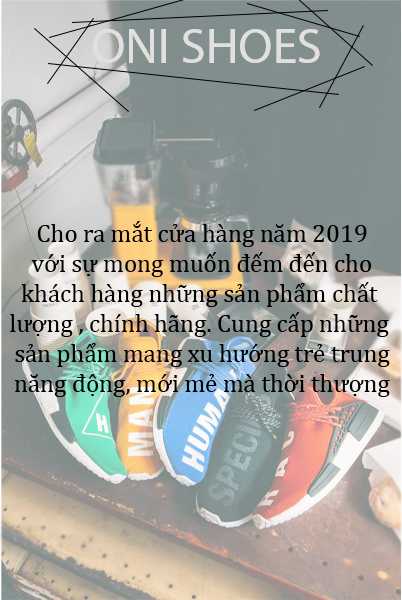
<style>
.page{position:relative;width:402px;height:600px}
.page>*{position:absolute;margin:0}
.t1{font:50px "MyriadPro-Regular";color:#e2dfdf}
.t2{font:25px "CambriaMath";color:#000000}
</style>
<div class="page">
<p class="t1" style="left:93px;top:29px;width:227px;height:34px">ONI SHOES</p>
<p class="t2" style="left:10px;top:221px;width:380px;height:176px;text-align:center">Cho ra mắt cửa hàng năm 2019<br>với sự mong muốn đếm đến cho<br>khách hàng những sản phẩm chất <br>lượng , chính hãng. Cung cấp những <br>sản phẩm mang xu hướng trẻ trung<br>năng động, mới mẻ mà thời thượng</p>
</div>
